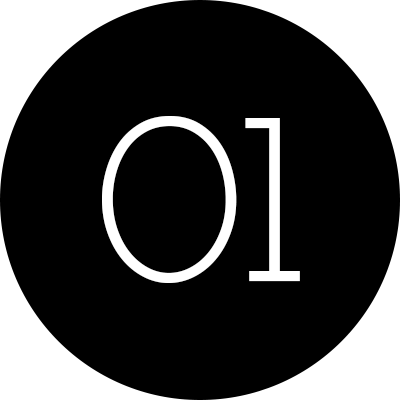
<style>
.page{position:relative;width:400px;height:400px;background:#000000}
.page>*{position:absolute;margin:0}
.t1{font:250px "JosefinSlab";color:#ffffff}
</style>
<div class="page">
<p class="t1" style="left:102px;top:116px;width:198px;height:167px">01</p>
</div>
